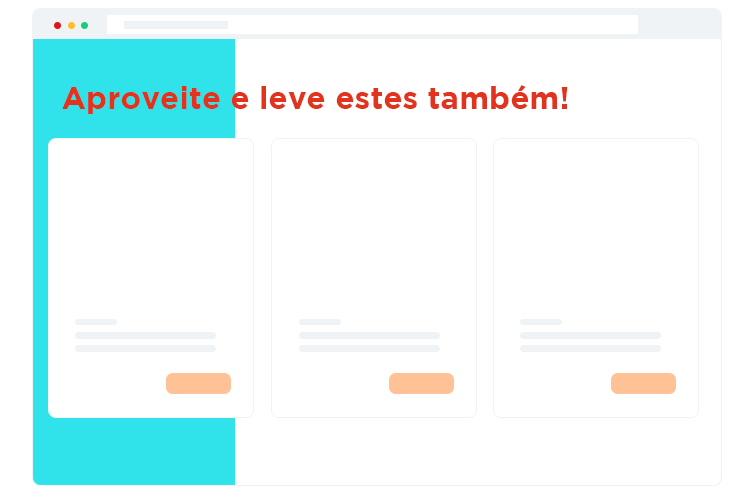
<style>
.page{position:relative;width:750px;height:500px;background:#ffffff}
.page>*{position:absolute;margin:0}
.t1{font:31.4px "Gotham-Bold";color:#e1331d}
</style>
<div class="page">
<p class="t1" style="left:62px;top:85px;width:506px;height:29px">Aproveite e leve estes também!</p>
</div>
